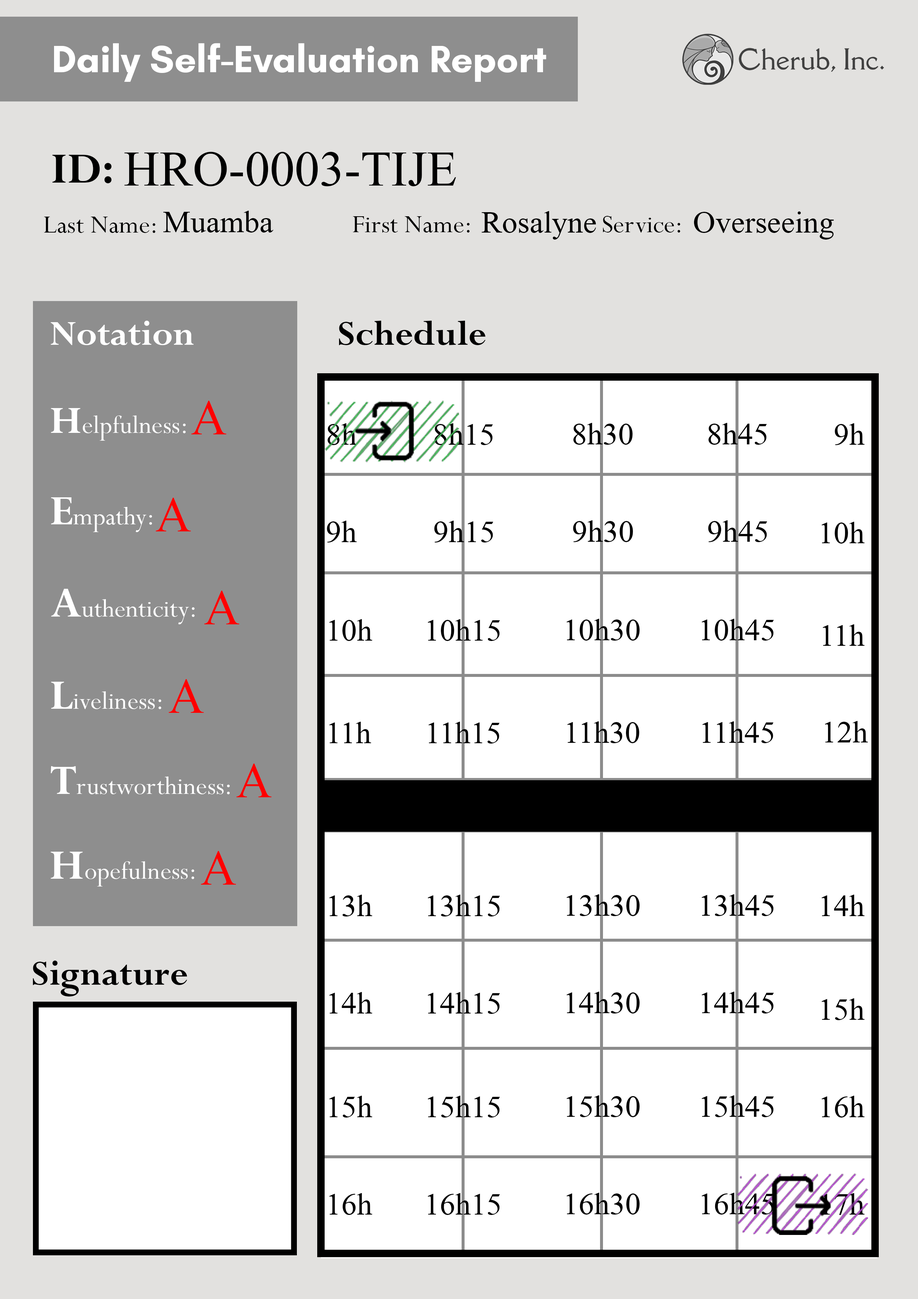
<style>
.page{position:relative;width:918px;height:1299px;background:#ffffff}
.page>*{position:absolute;margin:0}
.t1{font:74px "Microsoft-Himalaya";color:#000000}
.t2{font:46.3px "Microsoft-Himalaya";color:#000000}
.t3{font:74px "Microsoft-Himalaya";color:#ff0000}
</style>
<div class="page">
<p class="t1" style="left:124px;top:152px;width:332px;height:34px">HRO-0003-TIJE</p>
<p class="t2" style="left:163px;top:211px;width:111px;height:21px">Muamba</p>
<p class="t2" style="left:482px;top:211px;width:114px;height:29px">Rosalyne</p>
<p class="t2" style="left:694px;top:211px;width:140px;height:29px">Overseeing</p>
<p class="t3" style="left:191px;top:401px;width:36px;height:33px">A</p>
<p class="t2" style="left:328px;top:423px;width:29px;height:22px">8h</p>
<p class="t2" style="left:435px;top:423px;width:58px;height:22px">8h15</p>
<p class="t2" style="left:573px;top:423px;width:60px;height:22px">8h30</p>
<p class="t2" style="left:709px;top:423px;width:58px;height:22px">8h45</p>
<p class="t2" style="left:835px;top:423px;width:30px;height:22px">9h</p>
<p class="t3" style="left:156px;top:498px;width:35px;height:33px">A</p>
<p class="t2" style="left:327px;top:521px;width:30px;height:21px">9h</p>
<p class="t2" style="left:434px;top:521px;width:60px;height:21px">9h15</p>
<p class="t2" style="left:573px;top:520px;width:60px;height:22px">9h30</p>
<p class="t2" style="left:708px;top:520px;width:59px;height:22px">9h45</p>
<p class="t2" style="left:822px;top:522px;width:43px;height:21px">10h</p>
<p class="t3" style="left:204px;top:591px;width:36px;height:33px">A</p>
<p class="t2" style="left:329px;top:619px;width:43px;height:22px">10h</p>
<p class="t2" style="left:428px;top:619px;width:72px;height:22px">10h15</p>
<p class="t2" style="left:566px;top:619px;width:74px;height:21px">10h30</p>
<p class="t2" style="left:702px;top:619px;width:72px;height:21px">10h45</p>
<p class="t2" style="left:823px;top:624px;width:42px;height:22px">11h</p>
<p class="t3" style="left:169px;top:679px;width:35px;height:34px">A</p>
<p class="t2" style="left:329px;top:722px;width:42px;height:21px">11h</p>
<p class="t2" style="left:428px;top:722px;width:72px;height:21px">11h15</p>
<p class="t2" style="left:567px;top:721px;width:72px;height:22px">11h30</p>
<p class="t2" style="left:702px;top:721px;width:72px;height:22px">11h45</p>
<p class="t2" style="left:825px;top:721px;width:43px;height:21px">12h</p>
<p class="t3" style="left:237px;top:763px;width:35px;height:34px">A</p>
<p class="t3" style="left:201px;top:851px;width:35px;height:33px">A</p>
<p class="t2" style="left:329px;top:894px;width:43px;height:22px">13h</p>
<p class="t2" style="left:428px;top:894px;width:72px;height:22px">13h15</p>
<p class="t2" style="left:566px;top:894px;width:74px;height:22px">13h30</p>
<p class="t2" style="left:702px;top:894px;width:72px;height:22px">13h45</p>
<p class="t2" style="left:822px;top:894px;width:43px;height:22px">14h</p>
<p class="t2" style="left:329px;top:992px;width:43px;height:21px">14h</p>
<p class="t2" style="left:428px;top:992px;width:72px;height:22px">14h15</p>
<p class="t2" style="left:566px;top:991px;width:74px;height:22px">14h30</p>
<p class="t2" style="left:702px;top:991px;width:72px;height:22px">14h45</p>
<p class="t2" style="left:822px;top:998px;width:43px;height:22px">15h</p>
<p class="t2" style="left:329px;top:1095px;width:43px;height:22px">15h</p>
<p class="t2" style="left:428px;top:1095px;width:72px;height:22px">15h15</p>
<p class="t2" style="left:566px;top:1095px;width:74px;height:22px">15h30</p>
<p class="t2" style="left:702px;top:1095px;width:72px;height:22px">15h45</p>
<p class="t2" style="left:822px;top:1095px;width:43px;height:22px">16h</p>
<p class="t2" style="left:329px;top:1193px;width:43px;height:22px">16h</p>
<p class="t2" style="left:428px;top:1193px;width:72px;height:22px">16h15</p>
<p class="t2" style="left:566px;top:1192px;width:74px;height:22px">16h30</p>
<p class="t2" style="left:702px;top:1192px;width:72px;height:22px">16h45</p>
<p class="t2" style="left:822px;top:1193px;width:43px;height:22px">17h</p>
</div>
